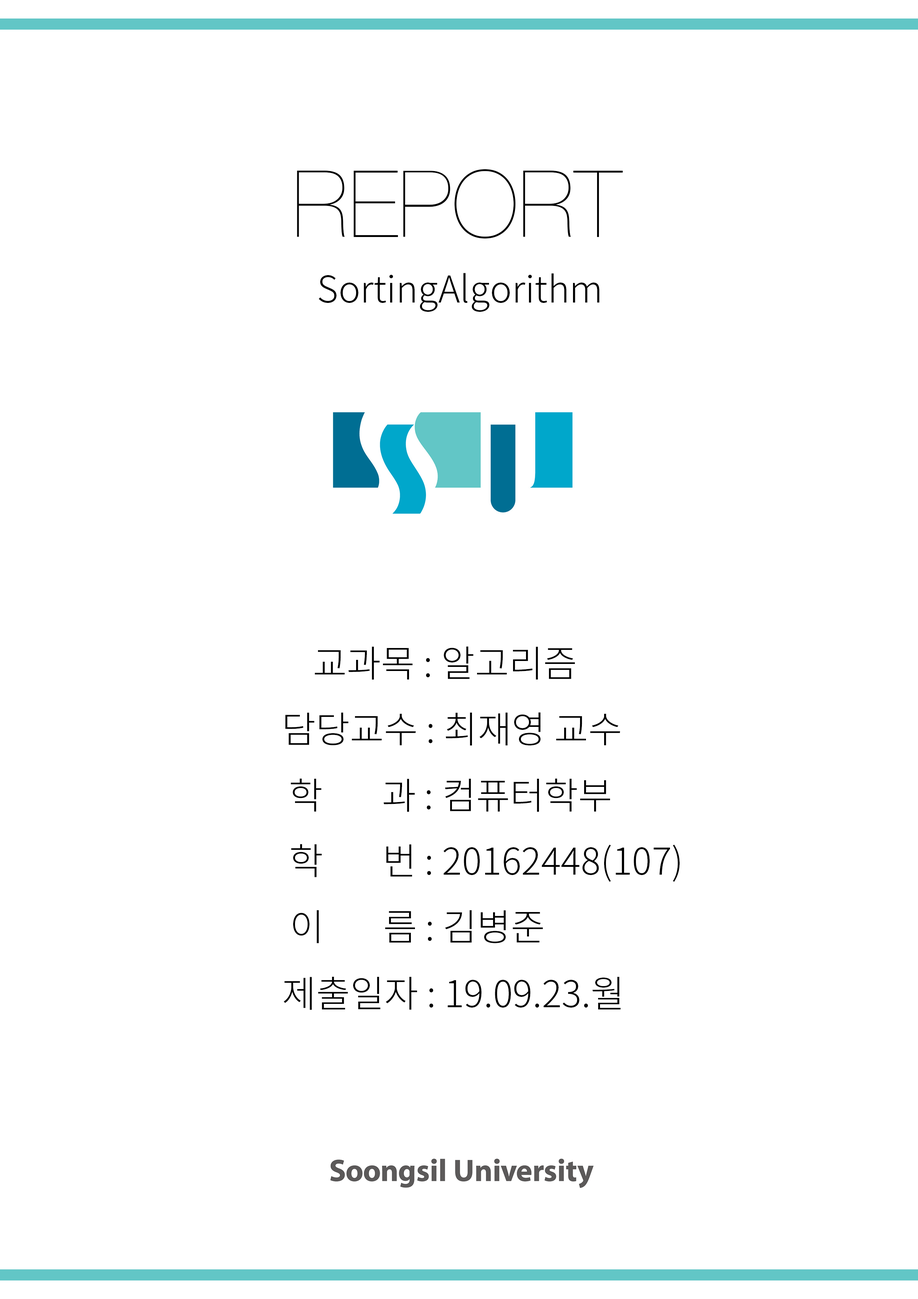
<style>
.page{position:relative;width:918px;height:1299px;background:#ffffff}
.page>*{position:absolute;margin:0}
.t1{font:37px "NotoSansCJKkr-Light";color:#000000}
</style>
<div class="page">
<p class="t1" style="left:319px;top:273px;width:280px;height:39px">SortingAlgorithm</p>
<p class="t1" style="left:315px;top:646px;width:260px;height:34px">교과목 : 알고리즘</p>
<p class="t1" style="left:285px;top:712px;width:335px;height:34px">담당교수 : 최재영 교수</p>
<p class="t1" style="left:291px;top:778px;width:319px;height:34px">학     과 : 컴퓨터학부</p>
<p class="t1" style="left:291px;top:844px;width:389px;height:38px">학     번 : 20162448(107)</p>
<p class="t1" style="left:293px;top:910px;width:250px;height:33px">이      름 : 김병준</p>
<p class="t1" style="left:284px;top:976px;width:337px;height:34px">제출일자 : 19.09.23.월</p>
</div>
